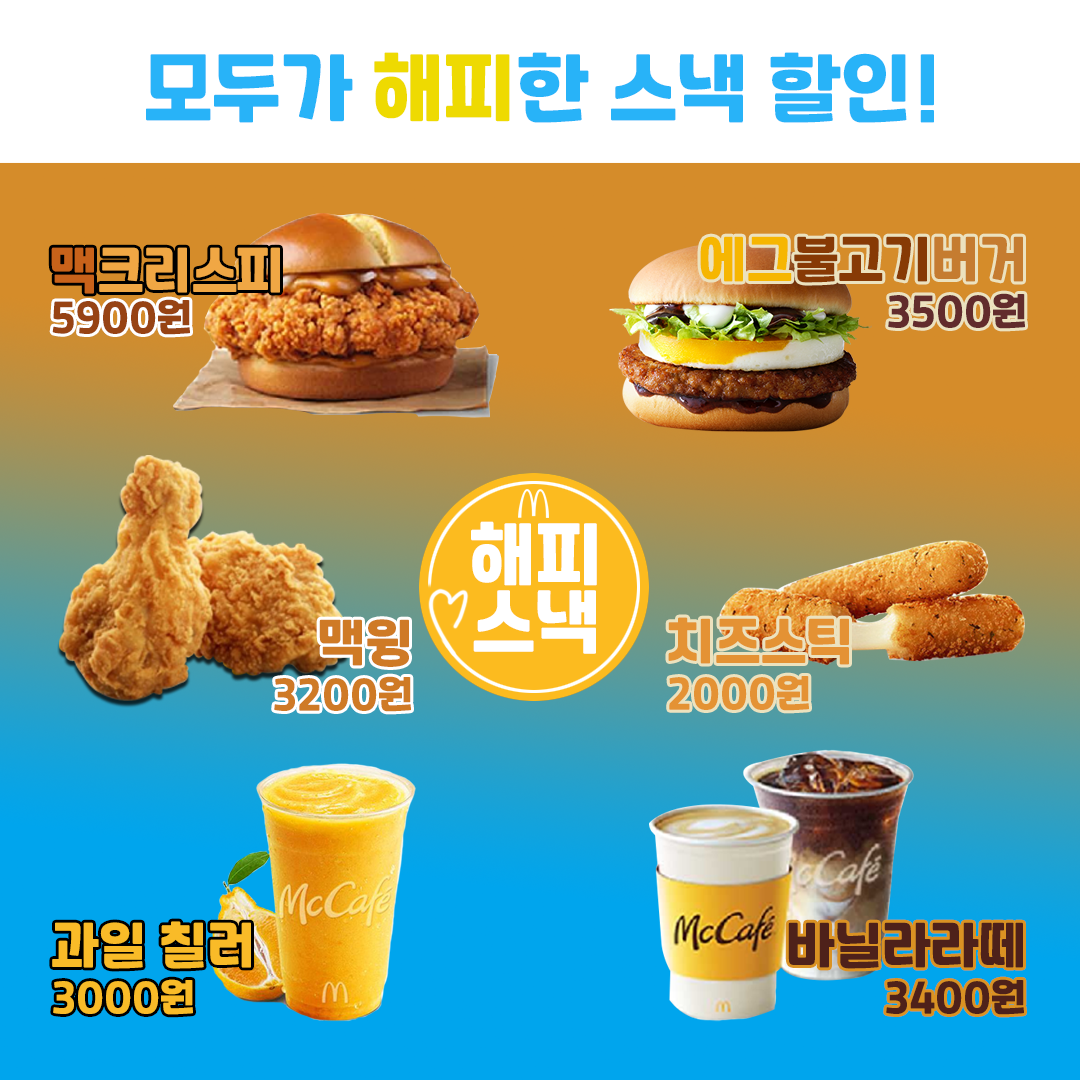
<style>
.page{position:relative;width:1080px;height:1080px}
.page>*{position:absolute;margin:0}
.t1{font:72px "RecipekoreaM";color:#28b3f8}
.t2{font:72px "RecipekoreaM";color:#eeda01}
.t3{font:36px/48px "RecipekoreaM";color:#622c2c}
.t4{font:48px/48px "RecipekoreaM";color:#f6b601}
.t5{font:48px/48px "RecipekoreaM";color:#873a05}
.t6{font:48px/48px "RecipekoreaM";color:#c57c30}
.t7{font:48px "RecipekoreaM";color:#f0a744}
.t8{font:48px "RecipekoreaM";color:#c8621a}
.t9{font:36px "RecipekoreaM";color:#974314}
.t10{font:36px/48px "RecipekoreaM";color:#e49234}
.t11{font:48px/48px "RecipekoreaM";color:#e49234}
.t12{font:36px/48px "RecipekoreaM";color:#cf7a26}
.t13{font:48px/48px "RecipekoreaM";color:#cf7a26}
.t14{font:48px/48px "RecipekoreaM";color:#f9bb28}
.t15{font:36px/48px "RecipekoreaM";color:#f9bb28}
.t16{font:48px/48px "RecipekoreaM";color:#4e211a}
.t17{font:36px/48px "RecipekoreaM";color:#4e211a}
</style>
<div class="page">
<p class="t1" style="left:146px;top:52px;width:788px;height:71px">모두가 <span class="t2">해피</span>한 스낵 할인!</p>
<p class="t3" style="left:700px;top:236px;width:325px;height:93px;text-align:right"><span class="t4">에그</span><span class="t5">불고기</span><span class="t6">버거<br></span>3500원</p>
<p class="t7" style="left:51px;top:247px;width:229px;height:47px"><span class="t8">맥</span>크리스피</p>
<p class="t9" style="left:52px;top:299px;width:138px;height:36px">5900원</p>
<p class="t10" style="left:668px;top:617px;width:181px;height:94px"><span class="t11">치즈스틱<br></span>2000원</p>
<p class="t12" style="left:274px;top:619px;width:137px;height:93px;text-align:right"><span class="t13">맥윙<br></span>3200원</p>
<p class="t14" style="left:52px;top:921px;width:199px;height:94px">과일 칠러<br><span class="t15">3000원</span></p>
<p class="t16" style="left:788px;top:922px;width:236px;height:93px;text-align:right">바닐라라떼<br><span class="t17">3400원</span></p>
</div>
